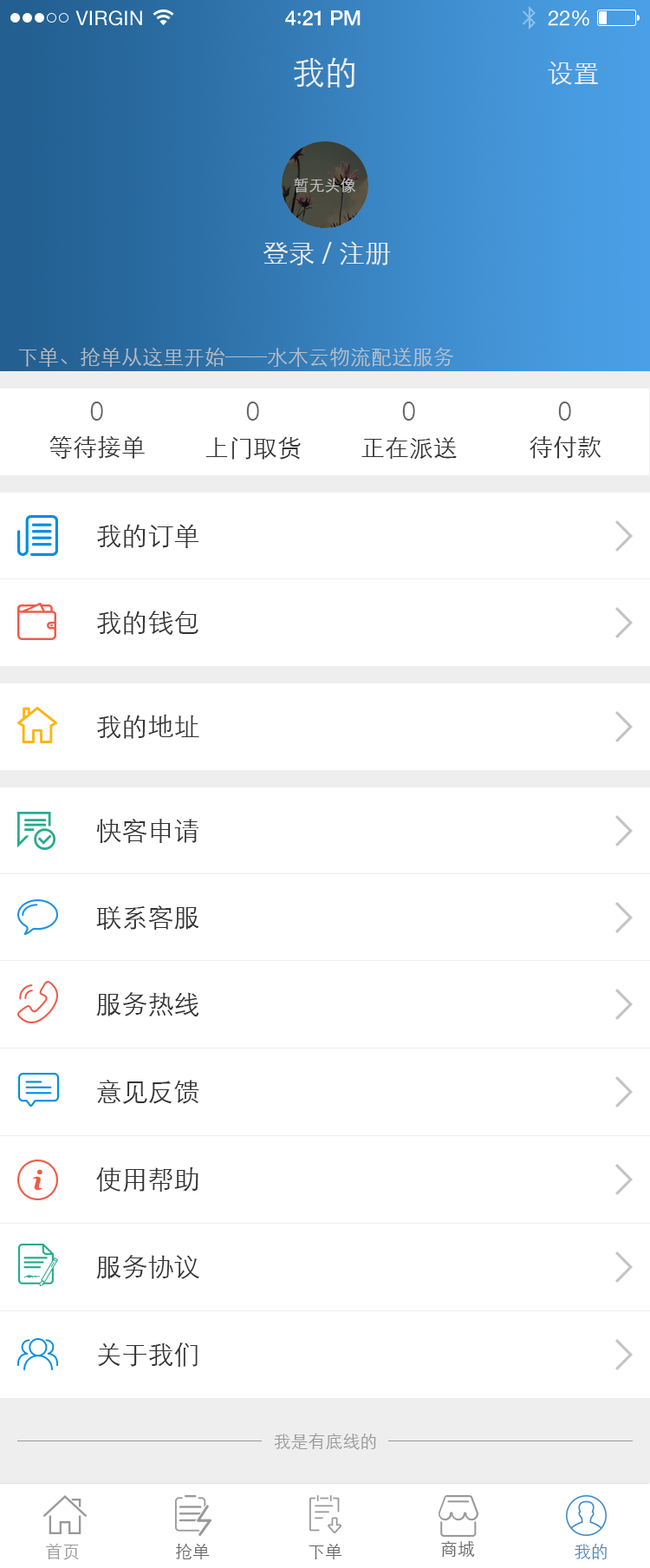
<style>
.page{position:relative;width:650px;height:1568px;background:#ffffff}
.page>*{position:absolute;margin:0}
.t1{font:19.9px "HelveticaNeue";letter-spacing:0.02em;color:#ffffff}
.t2{font:20.8px "HelveticaNeue-Medium";letter-spacing:-0.02em;color:#ffffff}
.t3{font:22.5px "Avenir-Medium";letter-spacing:-0.02em;color:#ffffff}
.t4{font:20.8px "HelveticaNeue";letter-spacing:-0.02em;color:#ffffff}
.t5{font:33px "STXihei";color:#eeeeee}
.t6{font:26px "STXihei";color:#eeeeee}
.t7{font:15.6px "STXihei";color:#c1c1c1}
.t8{font:20.8px "STXihei";color:#b6bec7}
.t9{font:24.3px "STXihei";color:#666666}
.t10{font:24.3px "STXihei";color:#333333}
.t11{font:26px "STXihei";color:#333333}
.t12{font:17.3px "STXihei";color:#999999}
.t13{font:17.3px "STXihei";color:#666666}
.t14{font:17.3px "STXihei";color:#418bc8}
</style>
<div class="page">
<p class="t1" style="left:75px;top:10px;width:67px;height:16px">VIRGIN</p>
<p class="t2" style="left:285px;top:10px;width:76px;height:16px">4<span class="t3">:</span>21 PM</p>
<p class="t4" style="left:548px;top:10px;width:42px;height:16px">22%</p>
<p class="t5" style="left:294px;top:57px;width:61px;height:31px">我的</p>
<p class="t6" style="left:548px;top:61px;width:50px;height:24px">设置</p>
<p class="t7" style="left:294px;top:178px;width:62px;height:15px">暂无头像</p>
<p class="t6" style="left:264px;top:241px;width:127px;height:24px">登录/注册</p>
<p class="t8" style="left:18px;top:347px;width:436px;height:20px">下单、抢单从这里开始——水木云物流配送服务</p>
<p class="t9" style="left:90px;top:402px;width:13px;height:19px">0</p>
<p class="t9" style="left:246px;top:402px;width:13px;height:19px">0</p>
<p class="t9" style="left:402px;top:402px;width:13px;height:19px">0</p>
<p class="t9" style="left:559px;top:402px;width:13px;height:19px">0</p>
<p class="t10" style="left:49px;top:435px;width:96px;height:24px">等待接单</p>
<p class="t10" style="left:206px;top:436px;width:95px;height:24px">上门取货</p>
<p class="t10" style="left:362px;top:436px;width:95px;height:23px">正在派送</p>
<p class="t10" style="left:530px;top:436px;width:72px;height:23px">待付款</p>
<p class="t11" style="left:97px;top:524px;width:102px;height:24px">我的订单</p>
<p class="t11" style="left:97px;top:611px;width:102px;height:24px">我的钱包</p>
<p class="t11" style="left:97px;top:715px;width:102px;height:24px">我的地址</p>
<p class="t11" style="left:96px;top:819px;width:103px;height:24px">快客申请</p>
<p class="t11" style="left:96px;top:905px;width:103px;height:25px">联系客服</p>
<p class="t11" style="left:96px;top:992px;width:103px;height:24px">服务热线</p>
<p class="t11" style="left:97px;top:1080px;width:102px;height:24px">意见反馈</p>
<p class="t11" style="left:96px;top:1167px;width:103px;height:25px">使用帮助</p>
<p class="t11" style="left:96px;top:1255px;width:103px;height:24px">服务协议</p>
<p class="t11" style="left:98px;top:1343px;width:100px;height:24px">关于我们</p>
<p class="t12" style="left:274px;top:1433px;width:102px;height:17px">我是有底线的</p>
<p class="t13" style="left:441px;top:1540px;width:34px;height:17px">商城</p>
<p class="t12" style="left:46px;top:1543px;width:33px;height:17px">首页</p>
<p class="t13" style="left:176px;top:1544px;width:34px;height:15px">抢单</p>
<p class="t13" style="left:309px;top:1544px;width:34px;height:15px">下单</p>
<p class="t14" style="left:575px;top:1544px;width:32px;height:15px">我的</p>
</div>
